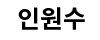
<style>
.page{position:relative;width:100px;height:40px;background:#ffffff}
.page>*{position:absolute;margin:0}
.t1{font:25px "NotoSansCJKkr-Bold";color:#000000}
</style>
<div class="page">
<p class="t1" style="left:18px;top:7px;width:67px;height:23px">인원수</p>
</div>
